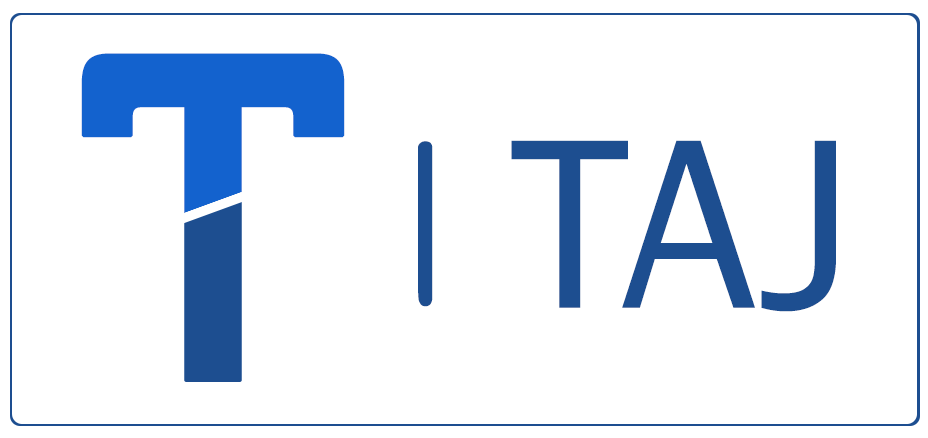
<style>
.page{position:relative;width:928px;height:438px;background:#ffffff}
.page>*{position:absolute;margin:0}
.t1{font:458.3px "Museo-700";letter-spacing:0.025em;color:#1362ce;font-weight:bold;scale:0.91 1}
.t2{font:162.5px "ComicSansMS";letter-spacing:0.025em;color:#1d4e90}
.t3{font:250px "FranklinGothic-Book";letter-spacing:0.025em;color:#1d4e90}
</style>
<div class="page">
<p class="t1" style="left:81px;top:53px;width:264px;height:329px">T</p>
<p class="t2" style="left:418px;top:141px;width:15px;height:166px">|</p>
<p class="t3" style="left:511px;top:140px;width:325px;height:172px">TAJ</p>
</div>
